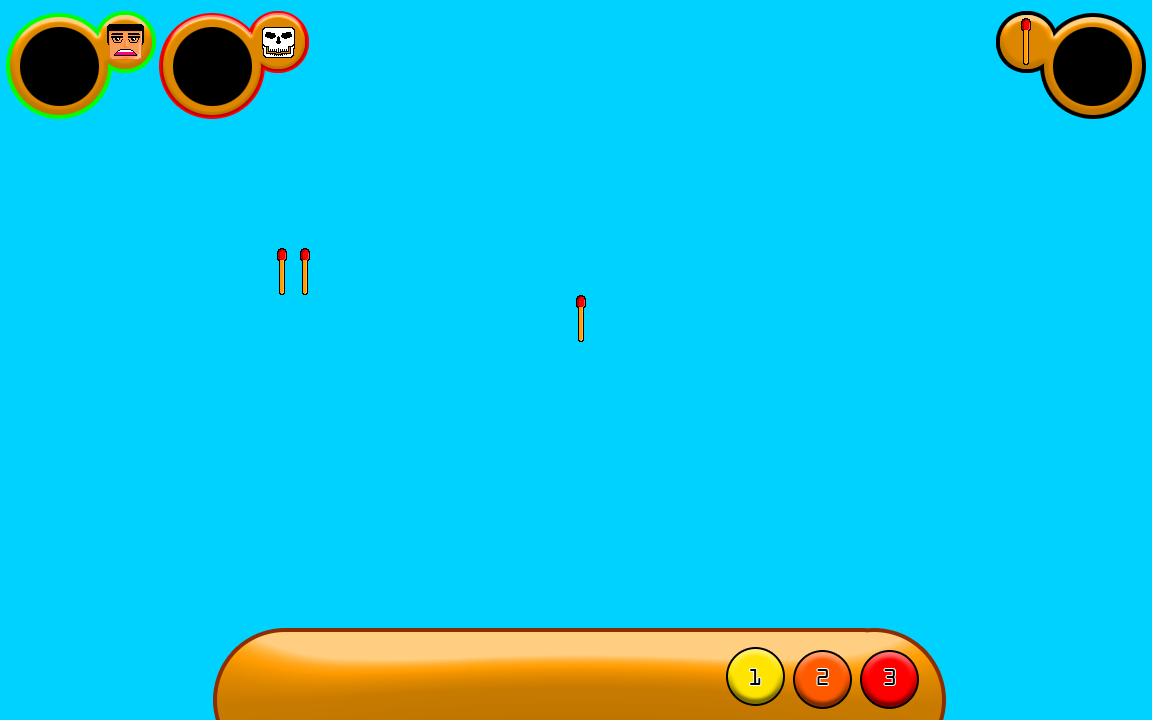
<style>
.page{position:relative;width:1152px;height:720px;background:#00d2ff}
.page>*{position:absolute;margin:0}
.t1{font:25.4px "OCRAExtended";color:#000000}
</style>
<div class="page">
<p class="t1" style="left:750px;top:669px;width:11px;height:16px">1</p>
<p class="t1" style="left:817px;top:669px;width:11px;height:16px">2</p>
<p class="t1" style="left:884px;top:669px;width:11px;height:16px">3</p>
</div>
